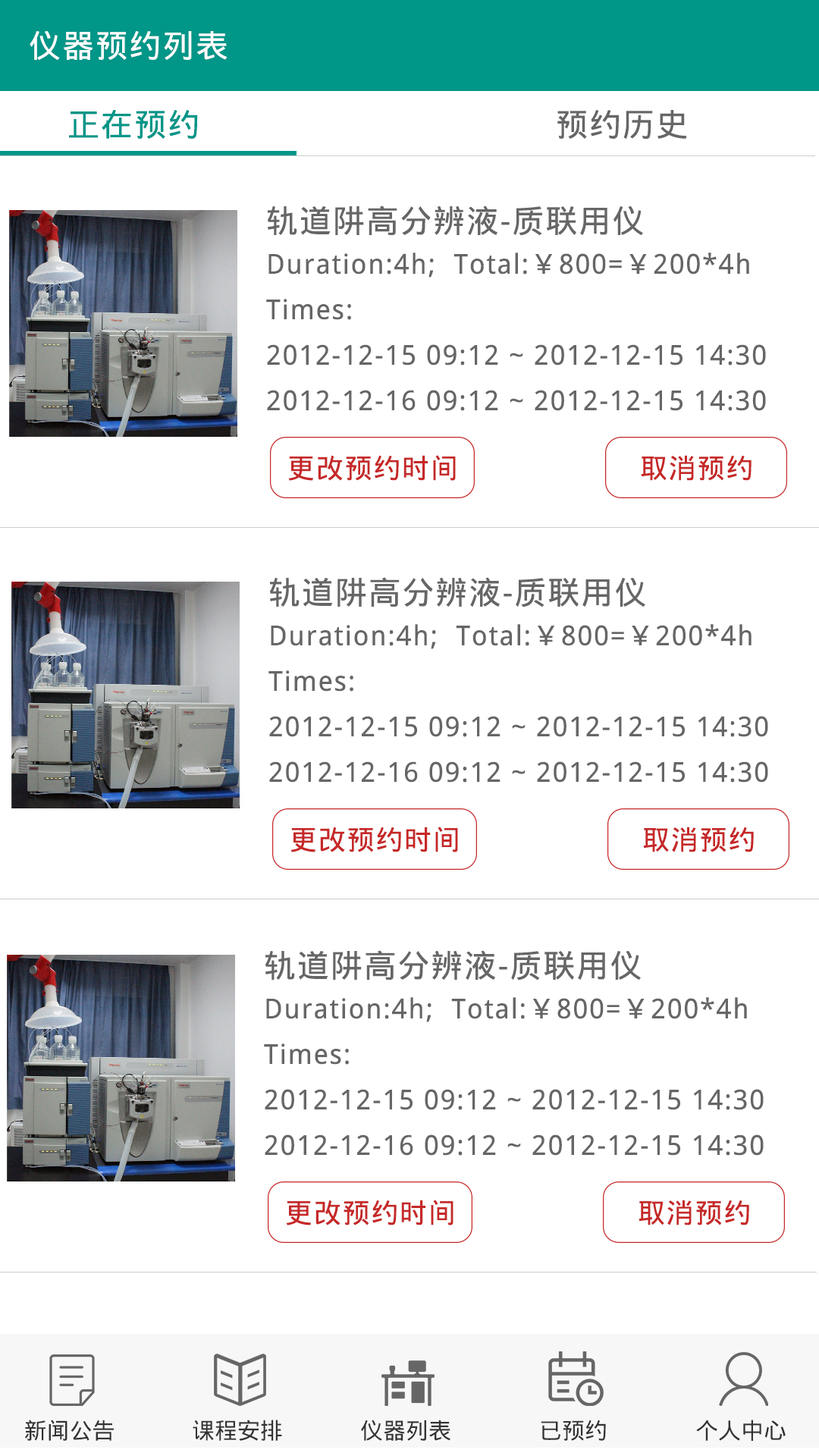
<style>
.page{position:relative;width:819px;height:1456px;background:#ffffff}
.page>*{position:absolute;margin:0}
.t1{font:31.8px "DroidSansFallback";letter-spacing:0.05em;color:#ffffff}
.t2{font:31.8px "DroidSansFallback";letter-spacing:0.05em;color:#009688}
.t3{font:31.8px "DroidSansFallback";letter-spacing:0.05em;color:#666666}
.t4{font:27.3px/45.5px "DroidSansFallback";letter-spacing:0.05em;color:#666666}
.t5{font:31.8px/45.5px "DroidSansFallback";letter-spacing:0.05em;color:#666666}
.t6{font:27.3px "DroidSansFallback";letter-spacing:0.05em;color:#c62828}
.t7{font:22.7px "DroidSansFallback";color:#333333}
</style>
<div class="page">
<p class="t1" style="left:30px;top:31px;width:197px;height:29px">仪器预约列表</p>
<p class="t2" style="left:69px;top:109px;width:129px;height:30px">正在预约</p>
<p class="t3" style="left:557px;top:110px;width:130px;height:29px">预约历史</p>
<p class="t4" style="left:266px;top:206px;width:500px;height:205px"><span class="t5">轨道阱高分辨液-质联用仪<br></span>Duration:4h;  Total:￥800=￥200*4h<br>Times:<br>2012-12-15 09:12 ~ 2012-12-15 14:30<br>2012-12-16 09:12 ~ 2012-12-15 14:30</p>
<p class="t6" style="left:288px;top:455px;width:168px;height:26px">更改预约时间</p>
<p class="t6" style="left:641px;top:455px;width:110px;height:26px">取消预约</p>
<p class="t4" style="left:268px;top:577px;width:500px;height:206px"><span class="t5">轨道阱高分辨液-质联用仪<br></span>Duration:4h;  Total:￥800=￥200*4h<br>Times:<br>2012-12-15 09:12 ~ 2012-12-15 14:30<br>2012-12-16 09:12 ~ 2012-12-15 14:30</p>
<p class="t6" style="left:290px;top:827px;width:168px;height:25px">更改预约时间</p>
<p class="t6" style="left:643px;top:827px;width:111px;height:25px">取消预约</p>
<p class="t4" style="left:264px;top:950px;width:500px;height:206px"><span class="t5">轨道阱高分辨液-质联用仪<br></span>Duration:4h;  Total:￥800=￥200*4h<br>Times:<br>2012-12-15 09:12 ~ 2012-12-15 14:30<br>2012-12-16 09:12 ~ 2012-12-15 14:30</p>
<p class="t6" style="left:286px;top:1200px;width:167px;height:25px">更改预约时间</p>
<p class="t6" style="left:639px;top:1200px;width:110px;height:25px">取消预约</p>
<p class="t7" style="left:24px;top:1420px;width:90px;height:21px">新闻公告</p>
<p class="t7" style="left:193px;top:1420px;width:89px;height:21px">课程安排</p>
<p class="t7" style="left:361px;top:1420px;width:89px;height:21px">仪器列表</p>
<p class="t7" style="left:541px;top:1420px;width:65px;height:21px">已预约</p>
<p class="t7" style="left:696px;top:1420px;width:90px;height:21px">个人中心</p>
</div>
